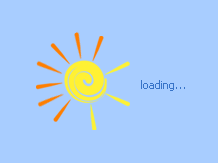
<style>
.page{position:relative;width:218px;height:163px;background:#a8cdff}
.page>*{position:absolute;margin:0}
.t1{font:11px "Tahoma";color:#3874c8}
</style>
<div class="page">
<p class="t1" style="left:141px;top:80px;width:44px;height:11px">loading...</p>
</div>
